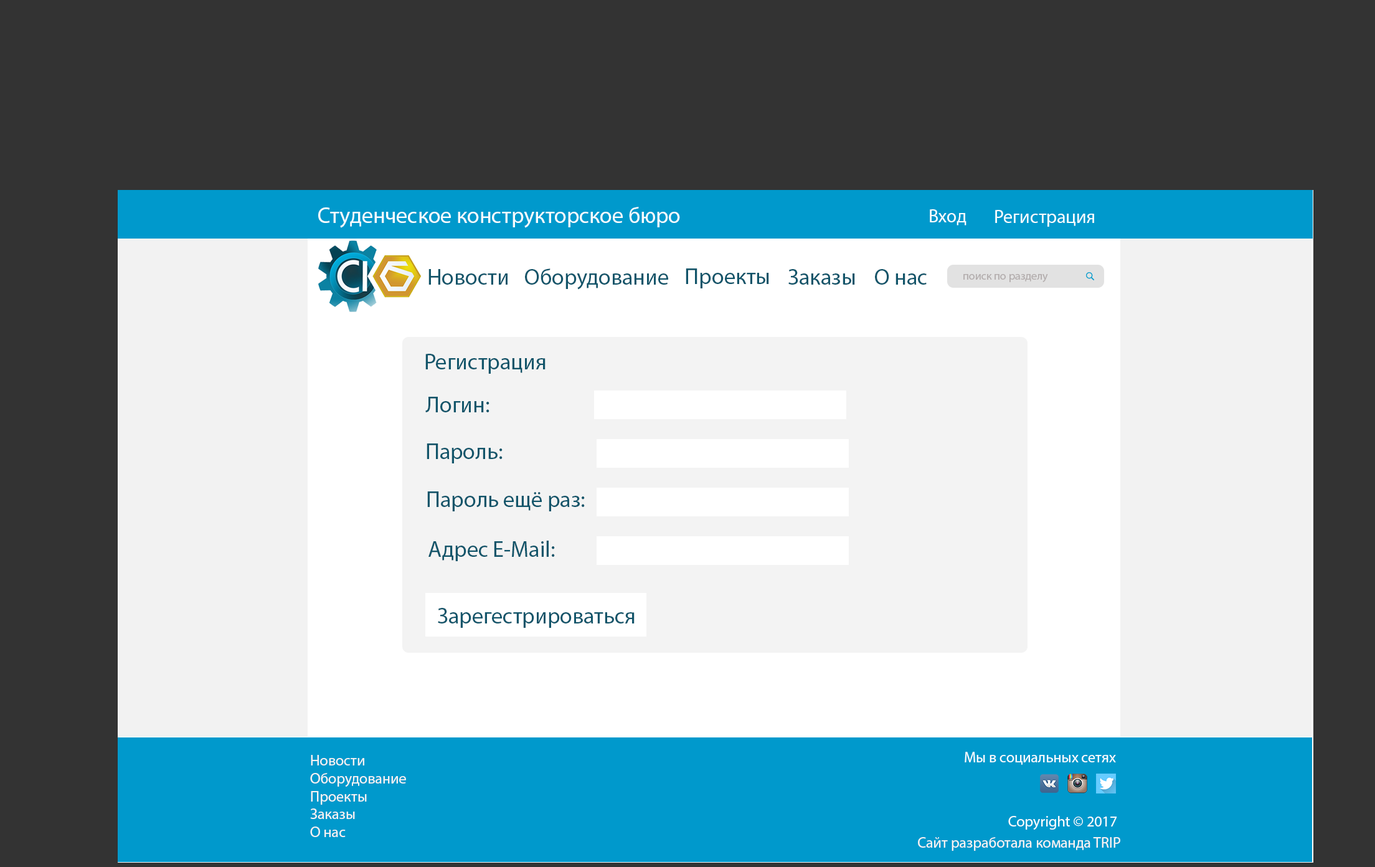
<style>
.page{position:relative;width:1375px;height:867px;background:#333333}
.page>*{position:absolute;margin:0}
.t1{font:22.4px "MyriadPro-Regular";color:#f8fdff}
.t2{font:18.7px "MyriadPro-Regular";color:#f8fdff}
.t3{font:22.4px "MyriadPro-Regular";color:#12556a}
.t4{font:11.2px "MyriadPro-Regular";color:#b3adad}
.t5{font:14.9px "MyriadPro-Regular";color:#f8f3f3}
.t6{font:14.9px "MyriadPro-Regular";color:#f8fdff}
</style>
<div class="page">
<p class="t1" style="left:318px;top:207px;width:362px;height:21px">Студенческое конструкторское бюро</p>
<p class="t2" style="left:930px;top:209px;width:37px;height:16px">Вход</p>
<p class="t2" style="left:995px;top:210px;width:99px;height:17px">Регистрация</p>
<p class="t3" style="left:429px;top:269px;width:79px;height:16px">Новости</p>
<p class="t3" style="left:525px;top:268px;width:143px;height:22px">Оборудование</p>
<p class="t3" style="left:686px;top:268px;width:83px;height:20px">Проекты</p>
<p class="t3" style="left:789px;top:269px;width:66px;height:16px">Заказы</p>
<p class="t3" style="left:875px;top:269px;width:52px;height:16px">О нас</p>
<p class="t4" style="left:964px;top:274px;width:84px;height:8px">поиск по разделу</p>
<p class="t3" style="left:425px;top:354px;width:121px;height:20px">Регистрация</p>
<p class="t3" style="left:425px;top:397px;width:65px;height:15px">Логин:</p>
<p class="t3" style="left:427px;top:443px;width:76px;height:20px">Пароль:</p>
<p class="t3" style="left:427px;top:491px;width:158px;height:20px">Пароль ещё раз:</p>
<p class="t3" style="left:429px;top:541px;width:126px;height:20px">Адрес E-Mail:</p>
<p class="t3" style="left:438px;top:608px;width:197px;height:20px">Зарегестрироваться</p>
<p class="t5" style="left:310px;top:755px;width:96px;height:82px">Новости<br>Оборудование<br>Проекты<br>Заказы<br>О нас</p>
<p class="t6" style="left:965px;top:752px;width:151px;height:13px">Мы в социальных сетях</p>
<p class="t6" style="left:1008px;top:816px;width:109px;height:14px">Copyright © 2017</p>
<p class="t5" style="left:918px;top:837px;width:203px;height:14px">Сайт разработала команда TRIP</p>
</div>
